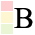
<style>
.page{position:relative;width:35px;height:35px;background:#ffffff}
.page>*{position:absolute;margin:0}
.t1{font:30px "TimesNewRomanPSMT";color:#000000}
</style>
<div class="page">
<p class="t1" style="left:14px;top:8px;width:19px;height:20px">B</p>
</div>
